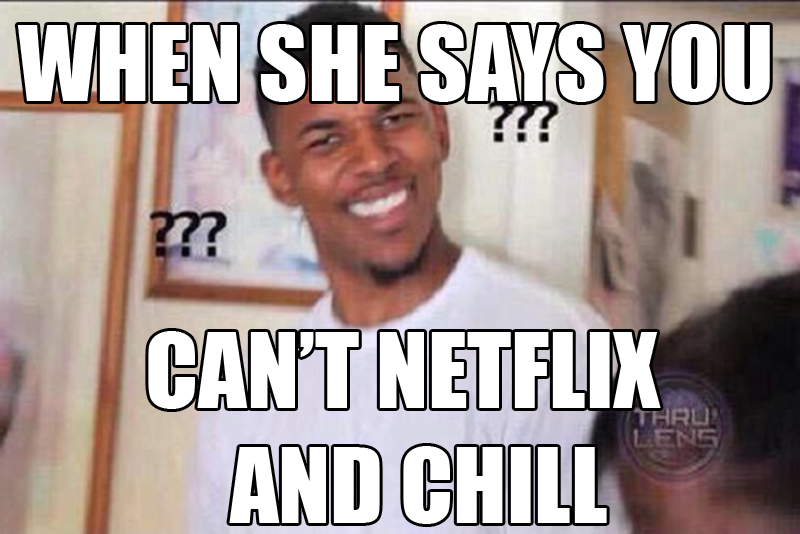
<style>
.page{position:relative;width:800px;height:534px}
.page>*{position:absolute;margin:0}
.t1{font:96px "Impact";color:#ffffff}
</style>
<div class="page">
<p class="t1" style="left:17px;top:24px;width:753px;height:78px">WHEN SHE SAYS YOU</p>
<p class="t1" style="left:148px;top:331px;width:513px;height:193px">CAN’T NETFLIX <br>     AND CHILL</p>
</div>
